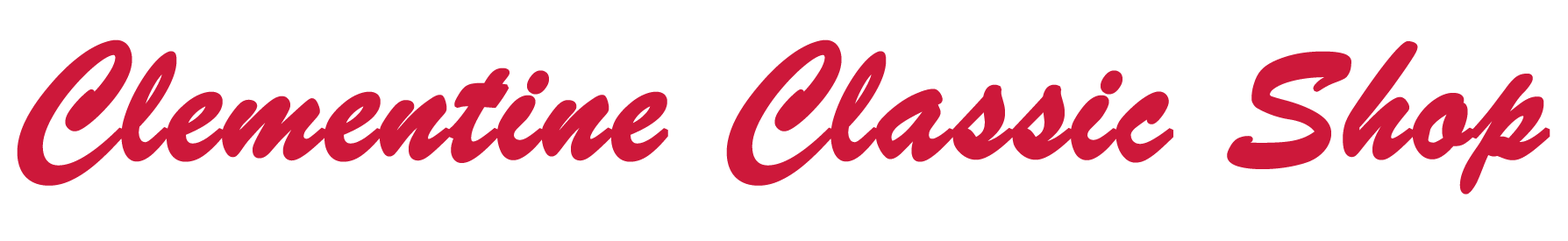
<style>
.page{position:relative;width:1568px;height:241px;background:#ffffff}
.page>*{position:absolute;margin:0}
.t1{font:175.4px "BrushScriptMT";color:#cd183a;font-weight:bold}
</style>
<div class="page">
<p class="t1" style="left:17px;top:39px;width:1533px;height:156px">Clementine Classic Shop</p>
</div>
